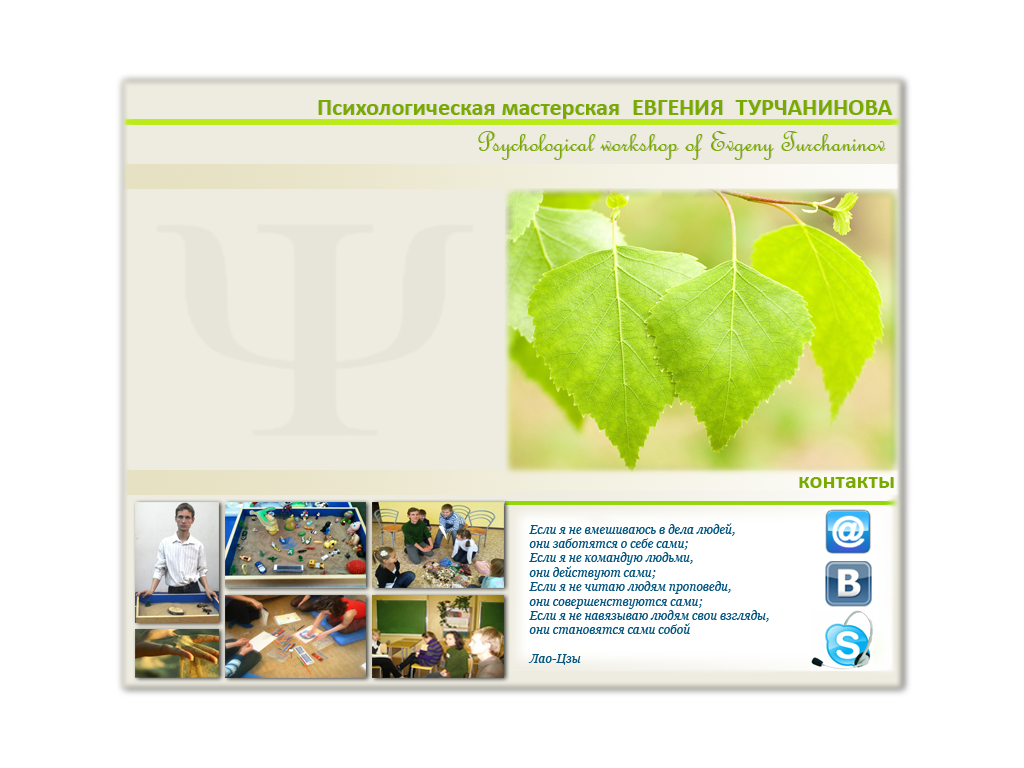
<style>
.page{position:relative;width:1024px;height:768px;background:#ffffff}
.page>*{position:absolute;margin:0}
.t1{font:24px "Calibri-Bold";color:#78aa01}
.t2{font:30px "FrenchScriptMT";color:#78aa01}
.t3{font:12px "Georgia-Italic";color:#055680}
.t4{font:12px "Calibri-Bold";color:#ffffff}
</style>
<div class="page">
<p class="t1" style="left:318px;top:100px;width:574px;height:60px;text-align:right">Психологическая мастерская  ЕВГЕНИЯ  ТУРЧАНИНОВА<br><span class="t2">Psychological workshop of Evgeny Turchaninov</span></p>
<p class="t1" style="left:799px;top:477px;width:95px;height:11px">контакты</p>
<p class="t3" style="left:528px;top:523px;width:241px;height:142px">Если я не вмешиваюсь в дела людей, <br>они заботятся о себе сами; <br>Если я не командую людьми, <br>они действуют сами;<br>Если я не читаю людям проповеди,<br>они совершенствуются сами;<br>Если я не навязываю людям свои взгляды, <br>они становятся сами собой<br><br>Лао-Цзы<br><span class="t4"><br>Лао-Цзы</span></p>
</div>
